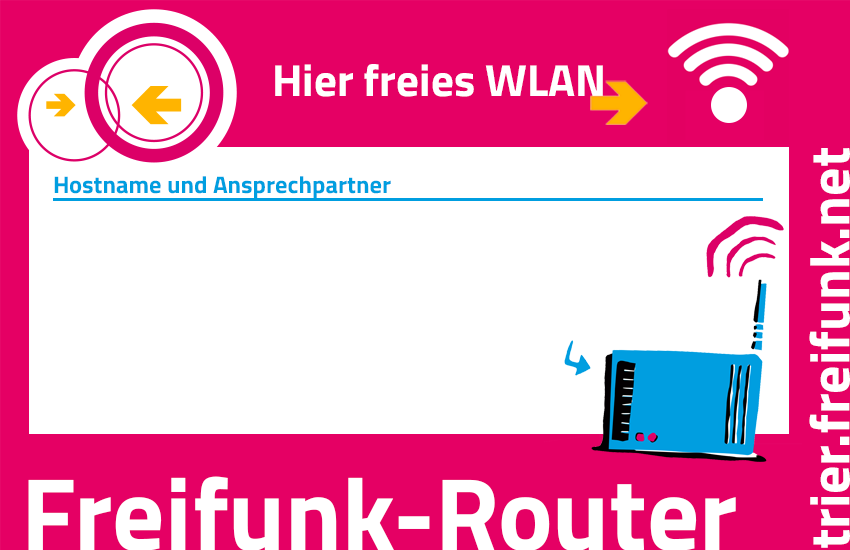
<style>
.page{position:relative;width:850px;height:550px;background:#ffffff}
.page>*{position:absolute;margin:0}
.t1{font:45px "TitilliumWeb-Bold";color:#ffffff}
.t2{font:55.6px "TitilliumWeb-Bold";color:#ffffff}
.t3{font:23.9px "TitilliumWeb-Bold";color:#009ee0}
.t4{font:103px "TitilliumWeb-Bold";color:#ffffff}
</style>
<div class="page">
<p class="t1" style="left:275px;top:64px;width:328px;height:33px">Hier freies WLAN</p>
<p class="t2" style="left:809px;top:148px;width:41px;height:400px;rotate:-90deg">trier.freifunk.net</p>
<p class="t3" style="left:54px;top:176px;width:337px;height:22px">Hostname und Ansprechpartner</p>
<p class="t4" style="left:28px;top:476px;width:708px;height:76px">Freifunk-Router</p>
</div>
